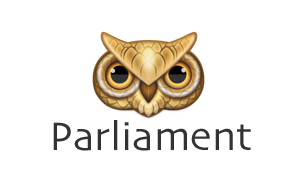
<style>
.page{position:relative;width:300px;height:192px;background:#ffffff}
.page>*{position:absolute;margin:0}
.t1{font:41.7px "Skia-Regular";color:#333333}
</style>
<div class="page">
<p class="t1" style="left:53px;top:120px;width:198px;height:31px">Parliament</p>
</div>
